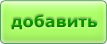
<style>
.page{position:relative;width:107px;height:44px}
.page>*{position:absolute;margin:0}
.t1{font:16px "Verdana-Bold";color:#0e9300}
</style>
<div class="page">
<p class="t1" style="left:11px;top:14px;width:86px;height:16px">добавить</p>
</div>
